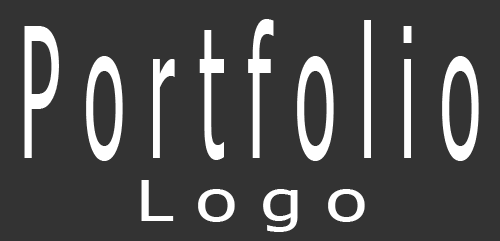
<style>
.page{position:relative;width:500px;height:241px;background:#333333}
.page>*{position:absolute;margin:0}
.t1{font:182.3px "Tahoma";color:#ffffff;scale:0.41 1}
.t2{font:57.1px "Tahoma";color:#ffffff;scale:1.31 1}
</style>
<div class="page">
<p class="t1" style="left:24px;top:19px;width:455px;height:142px">P o r t f o l i o</p>
<p class="t2" style="left:141px;top:180px;width:224px;height:52px">L o g o</p>
</div>
